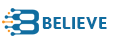
<style>
.page{position:relative;width:113px;height:43px;background:#ffffff}
.page>*{position:absolute;margin:0}
.t1{font:14px "HeadlineR-HM";color:#106da0}
</style>
<div class="page">
<p class="t1" style="left:42px;top:17px;width:65px;height:12px">BELIEVE</p>
</div>
